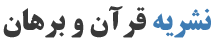
<style>
.page{position:relative;width:217px;height:47px;background:#ffffff}
.page>*{position:absolute;margin:0}
.t1{font:29.6px "BTitrBold";color:#393939}
.t2{font:29.6px "BTitrBold";color:#3e7cb4}
</style>
<div class="page">
<p class="t1" style="left:3px;top:6px;width:208px;height:32px"><span class="t2">نشریه </span>قرآن و برهان</p>
</div>
